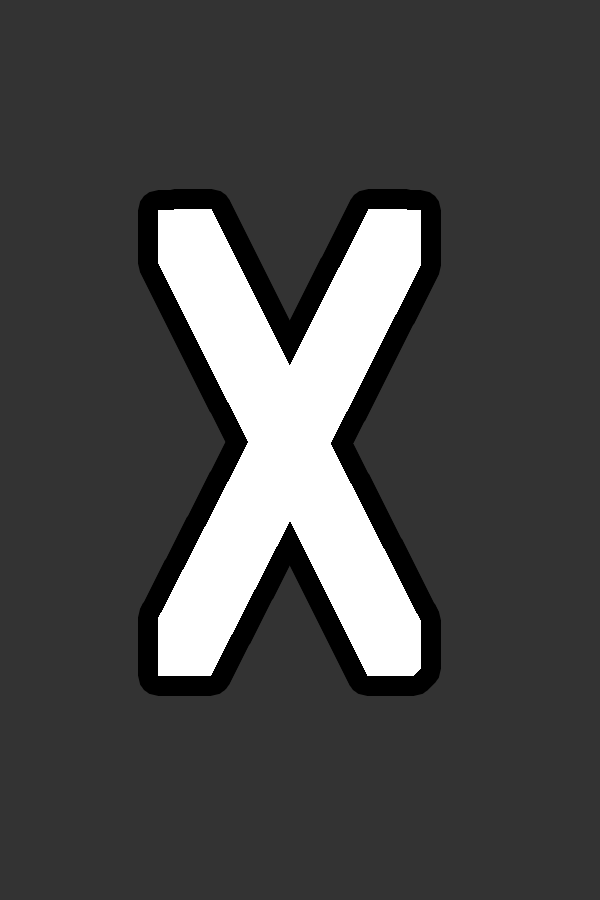
<style>
.page{position:relative;width:600px;height:900px;background:#333333}
.page>*{position:absolute;margin:0}
.t1{font:625px "Digiface";color:#ffffff;font-weight:bold}
</style>
<div class="page">
<p class="t1" style="left:158px;top:209px;width:263px;height:467px">x</p>
</div>
